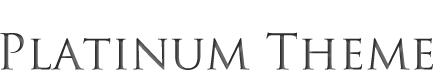
<style>
.page{position:relative;width:436px;height:80px;background:#ffffff}
.page>*{position:absolute;margin:0}
.t1{font:48px "TrajanPro-Regular"}
</style>
<div class="page">
<p class="t1" style="left:0px;top:32px;width:433px;height:38px">Platinum Theme</p>
</div>
